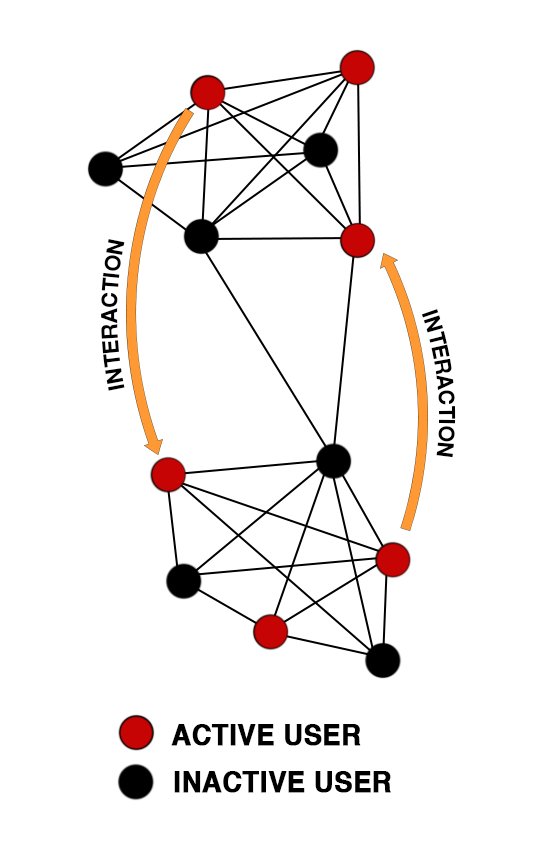
<style>
.page{position:relative;width:554px;height:862px;background:#ffffff}
.page>*{position:absolute;margin:0}
.t1{font:21.8px "HelveticaNeue-Bold";color:#000000;scale:0.93 1}
.t2{font:29px "Helvetica-Bold";color:#000000;font-weight:bold;scale:0.93 1}
</style>
<div class="page">
<p class="t1" style="left:101px;top:239px;width:24px;height:152px;rotate:-79deg">INTERACTION</p>
<p class="t1" style="left:421px;top:309px;width:35px;height:149px;rotate:84deg">INTERACTION</p>
<p class="t2" style="left:171px;top:724px;width:190px;height:22px">ACTIVE USER</p>
<p class="t2" style="left:174px;top:771px;width:217px;height:22px">INACTIVE USER</p>
</div>
